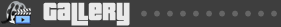
<style>
.page{position:relative;width:281px;height:27px;background:#3e3e3e}
.page>*{position:absolute;margin:0}
.t1{font:27px "PricedownBl-Regular";color:#eaeaea}
</style>
<div class="page">
<p class="t1" style="left:43px;top:2px;width:87px;height:24px">Gallery</p>
</div>
